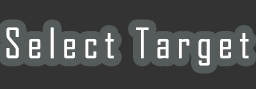
<style>
.page{position:relative;width:256px;height:89px;background:#333333}
.page>*{position:absolute;margin:0}
.t1{font:40px "AgencyFB-Reg";letter-spacing:0.16em;color:#ffffff}
</style>
<div class="page">
<p class="t1" style="left:6px;top:27px;width:243px;height:39px">Select Target</p>
</div>
